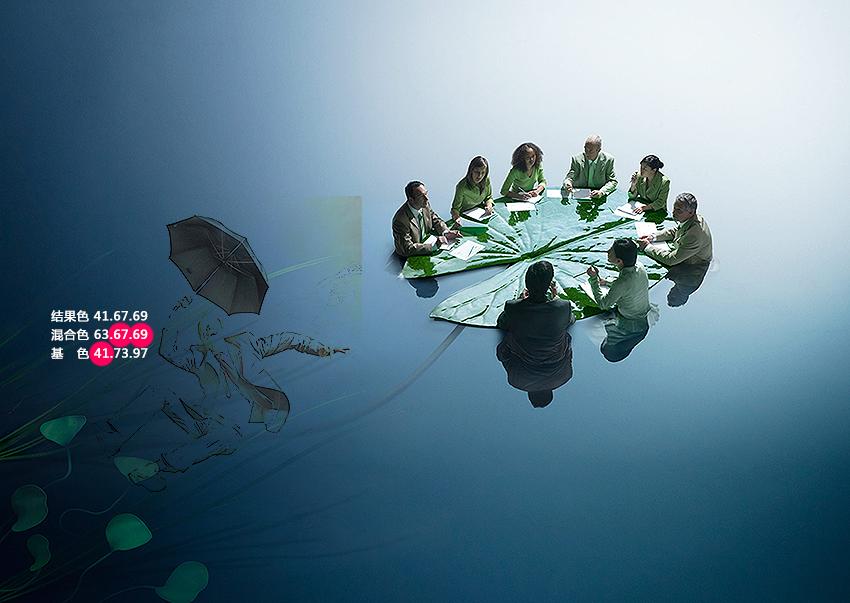
<style>
.page{position:relative;width:850px;height:603px}
.page>*{position:absolute;margin:0}
.t1{font:12px/18.5px "MicrosoftYaHei";letter-spacing:0.04em;color:#ffffff;font-weight:bold}
</style>
<div class="page">
<p class="t1" style="left:51px;top:310px;width:97px;height:49px">结果色 41.67.69<br>混合色 63.67.69<br>基   色 41.73.97</p>
</div>
